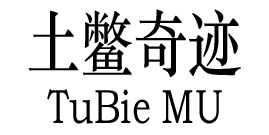
<style>
.page{position:relative;width:269px;height:135px;background:#ffffff}
.page>*{position:absolute;margin:0}
.t1{font:72px "STZhongsong";color:#000000;scale:0.75 1}
.t2{font:48px "STZhongsong";color:#000000;scale:0.75 1}
</style>
<div class="page">
<p class="t1" style="left:28px;top:9px;width:213px;height:68px">土鳖奇迹</p>
<p class="t2" style="left:47px;top:89px;width:175px;height:35px">TuBie MU</p>
</div>
